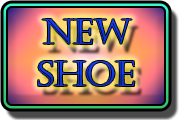
<style>
.page{position:relative;width:180px;height:120px}
.page>*{position:absolute;margin:0}
.t1{font:34.6px "Castellar";color:#153eec}
</style>
<div class="page">
<p class="t1" style="left:38px;top:19px;width:97px;height:67px;text-align:justify">New<br>Shoe</p>
</div>
